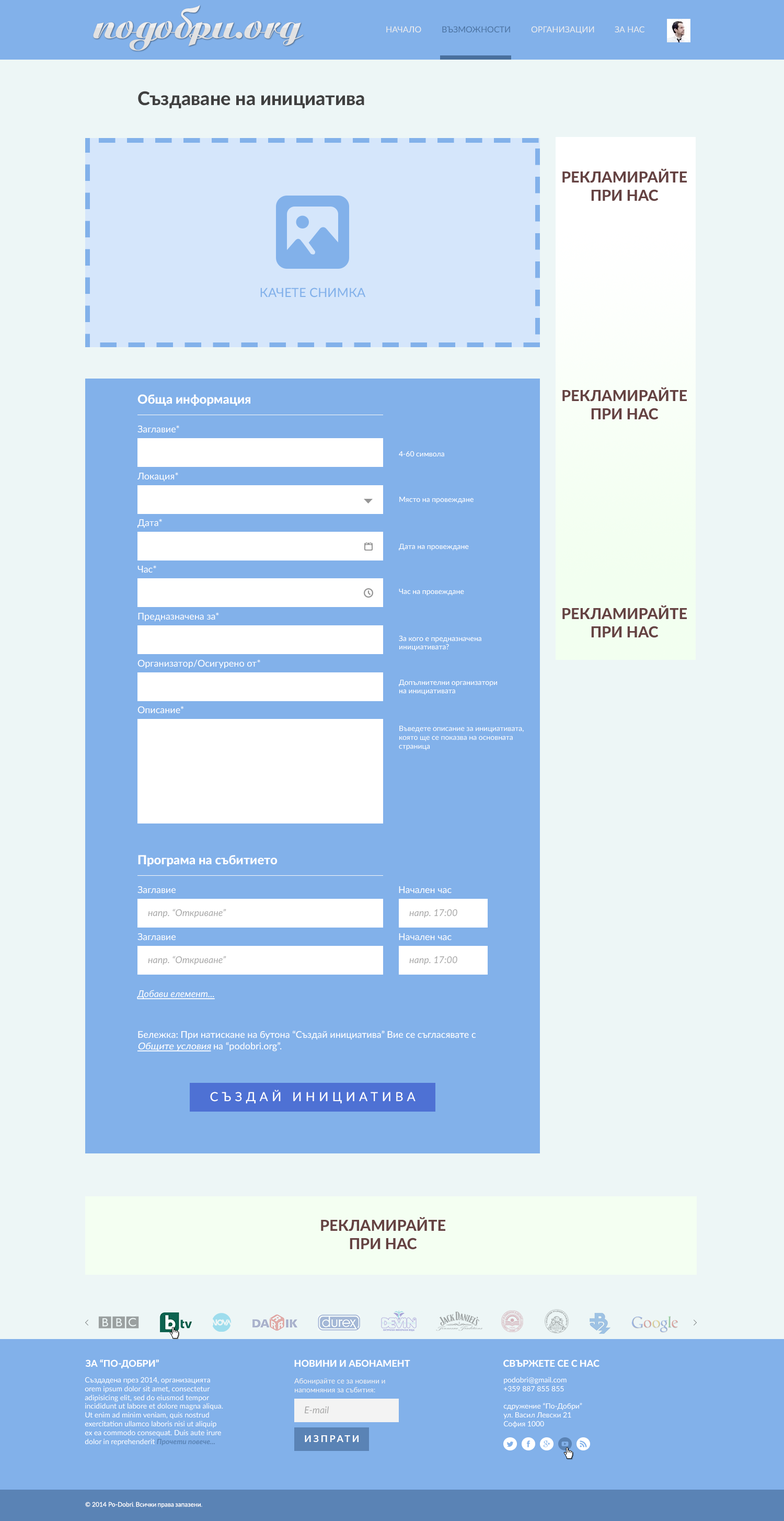
<style>
.page{position:relative;width:784px;height:1521px;background:#edf6f6}
.page>*{position:absolute;margin:0}
.t1{font:18.8px "Lato-Heavy";color:#404040}
.t2{font:15.2px "Lato-Heavy";color:#654242}
.t3{font:12.5px "Lato-Medium";color:#82b1ea}
.t4{font:12.5px "Lato-Heavy";color:#ffffff}
.t5{font:9.4px "Lato-Regular";color:#ffffff}
.t6{font:7.3px "Lato-Medium";color:#ffffff}
.t7{font:7.3px "Lato-Regular";color:#ffffff}
.t8{font:9.4px "Lato-Italic";color:#a6a6a6}
.t9{font:9.4px "Lato-Italic";color:#ffffff;text-decoration:underline}
.t10{font:9.4px "Lato-Medium";color:#ffffff}
.t11{font:9.4px "Lato-Medium";color:#ffffff;font-style:italic;text-decoration:underline}
.t12{font:12.5px "Lato-Medium";letter-spacing:0.3em;color:#ffffff}
</style>
<div class="page">
<p class="t1" style="left:138px;top:91px;width:226px;height:18px">Създаване на инициатива</p>
<p class="t2" style="left:562px;top:168px;width:125px;height:470px;text-align:center">РЕКЛАМИРАЙТЕ <br>ПРИ НАС<br><br><br><br><br><br><br><br><br><br><br>РЕКЛАМИРАЙТЕ <br>ПРИ НАС<br><br><br><br><br><br><br><br><br><br><br>РЕКЛАМИРАЙТЕ <br>ПРИ НАС</p>
<p class="t3" style="left:260px;top:288px;width:106px;height:9px">КАЧЕТЕ СНИМКА</p>
<p class="t4" style="left:137px;top:394px;width:113px;height:12px">Обща информация</p>
<p class="t5" style="left:137px;top:425px;width:42px;height:8px">Заглавие*</p>
<p class="t6" style="left:399px;top:451px;width:45px;height:5px">4-60 символа</p>
<p class="t5" style="left:137px;top:472px;width:41px;height:9px">Локация*</p>
<p class="t6" style="left:399px;top:497px;width:75px;height:6px">Място на провеждане</p>
<p class="t5" style="left:137px;top:519px;width:25px;height:9px">Дата*</p>
<p class="t6" style="left:399px;top:544px;width:70px;height:6px">Дата на провеждане</p>
<p class="t5" style="left:137px;top:565px;width:19px;height:8px">Час*</p>
<p class="t6" style="left:399px;top:589px;width:65px;height:6px">Час на провеждане</p>
<p class="t5" style="left:138px;top:612px;width:81px;height:10px">Предназначена за*</p>
<p class="t6" style="left:399px;top:635px;width:82px;height:16px">За кого е предназначена<br>инициативата?</p>
<p class="t5" style="left:137px;top:659px;width:123px;height:9px">Организатор/Осигурено от*</p>
<p class="t6" style="left:399px;top:680px;width:98px;height:15px">Допълнителни организатори<br>на инициативата</p>
<p class="t5" style="left:137px;top:706px;width:47px;height:8px">Описание*</p>
<p class="t7" style="left:399px;top:726px;width:125px;height:24px">Въведете описание за инициативата,<br>която ще се показва на основната <br>страница</p>
<p class="t4" style="left:138px;top:855px;width:140px;height:11px">Програма на събитието</p>
<p class="t5" style="left:137px;top:886px;width:39px;height:7px">Заглавие</p>
<p class="t5" style="left:399px;top:886px;width:53px;height:7px">Начален час</p>
<p class="t8" style="left:148px;top:909px;width:78px;height:8px">напр. “Откриване”</p>
<p class="t8" style="left:409px;top:909px;width:48px;height:8px">напр. 17:00</p>
<p class="t5" style="left:137px;top:933px;width:39px;height:7px">Заглавие</p>
<p class="t5" style="left:399px;top:933px;width:53px;height:7px">Начален час</p>
<p class="t8" style="left:148px;top:956px;width:78px;height:8px">напр. “Откриване”</p>
<p class="t8" style="left:409px;top:956px;width:48px;height:8px">напр. 17:00</p>
<p class="t9" style="left:137px;top:990px;width:78px;height:9px">Добави елемент...</p>
<p class="t10" style="left:137px;top:1030px;width:339px;height:21px">Бележка: При натискане на бутона “Създай инициатива” Вие се съгласявате с <span class="t11">Общите условия</span> на “podobri.org”.</p>
<p class="t12" style="left:210px;top:1089px;width:206px;height:15px">СЪЗДАЙ ИНИЦИАТИВА</p>
<p class="t2" style="left:321px;top:1216px;width:124px;height:33px;text-align:center">РЕКЛАМИРАЙТЕ <br>ПРИ НАС</p>
</div>
